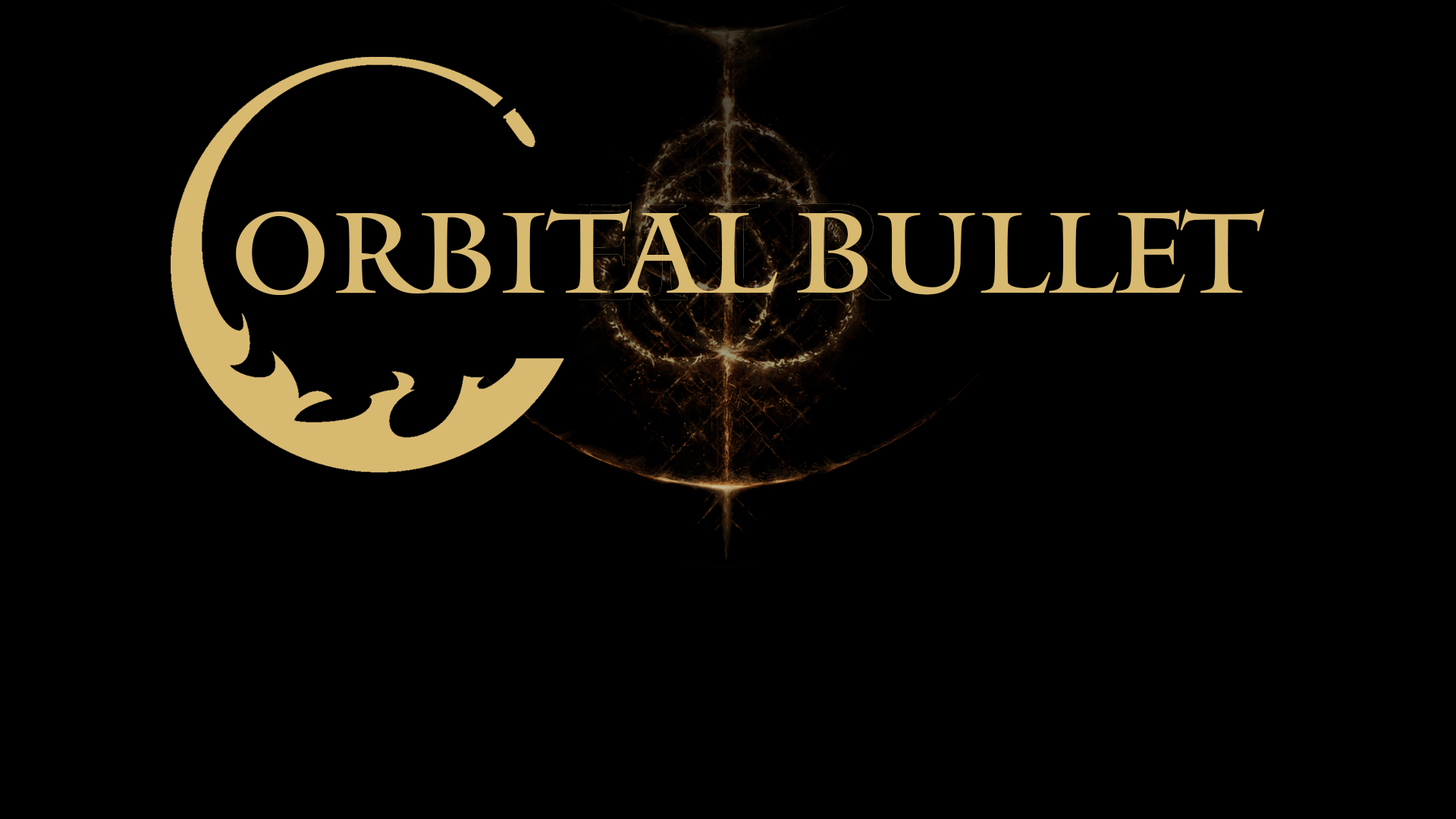
<style>
.page{position:relative;width:1456px;height:819px;background:#000000}
.page>*{position:absolute;margin:0}
.t1{font:113.7px "Mantinia";color:#d8b970}
</style>
<div class="page">
<p class="t1" style="left:236px;top:209px;width:1029px;height:86px">ORBITAL BULLET</p>
</div>
